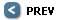
<style>
.page{position:relative;width:60px;height:20px;background:#ffffff}
.page>*{position:absolute;margin:0}
.t1{font:11px "Tahoma-Bold";color:#000000;text-transform:uppercase}
</style>
<div class="page">
<p class="t1" style="left:27px;top:7px;width:27px;height:8px">PREV</p>
</div>
